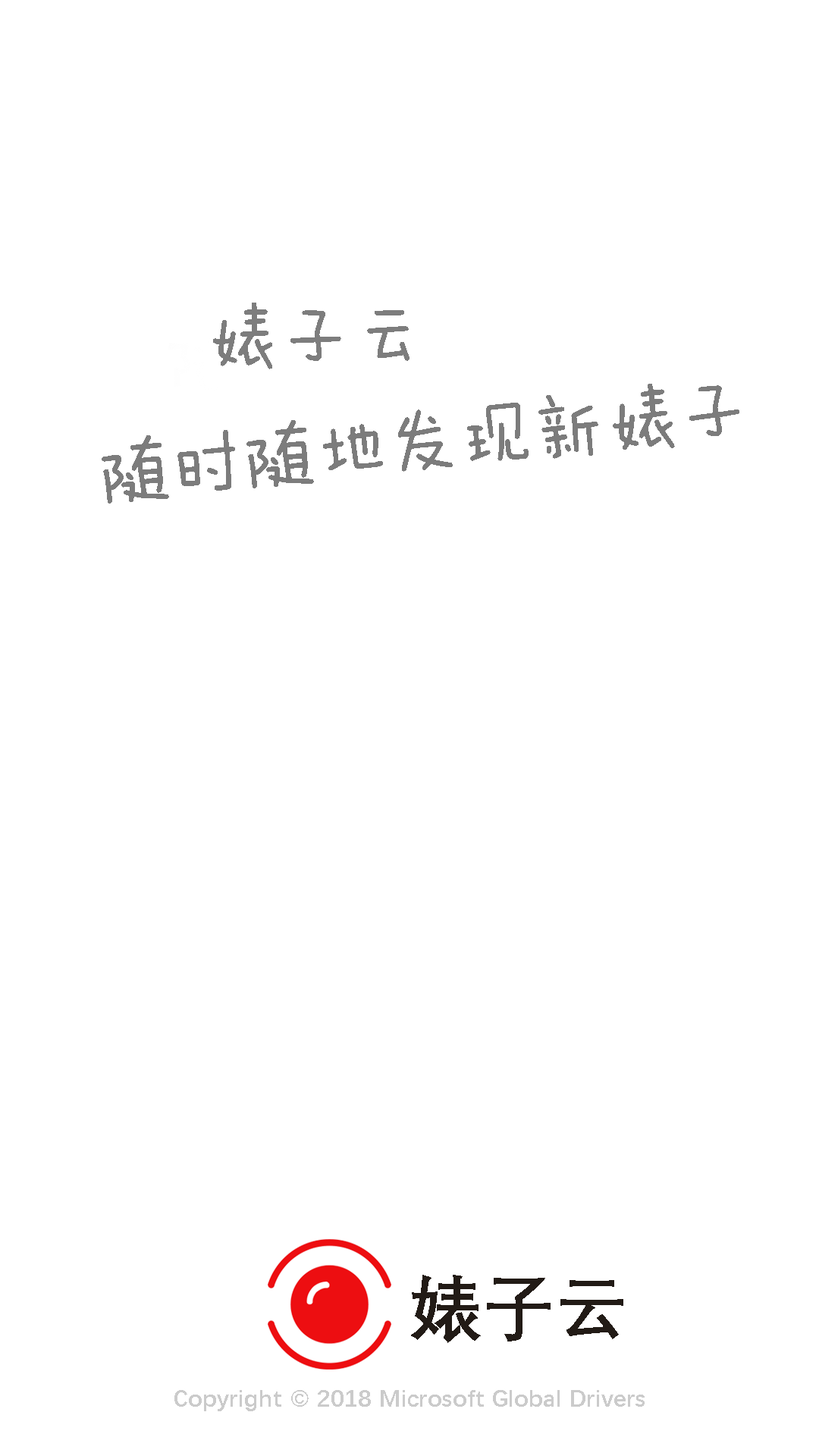
<style>
.page{position:relative;width:819px;height:1456px;background:#ffffff}
.page>*{position:absolute;margin:0}
.t1{font:72.8px "FZMWJW--GB1-0";color:#7d7d7d}
.t2{font:72.8px "FZMWJW--GB1-0";color:#7c7c7c}
.t3{font:72.8px "DengXian-Bold";color:#221b16}
.t4{font:24.3px "DengXian-Bold";color:#cbcbcb}
</style>
<div class="page">
<p class="t1" style="left:213px;top:303px;width:196px;height:66px">婊子云</p>
<p class="t2" style="left:102px;top:384px;width:637px;height:120px;rotate:-6deg">随时随地发现新婊子</p>
<p class="t3" style="left:411px;top:1275px;width:212px;height:68px">婊子云</p>
<p class="t4" style="left:174px;top:1390px;width:471px;height:21px">Copyright © 2018 Microsoft Global Drivers</p>
</div>
